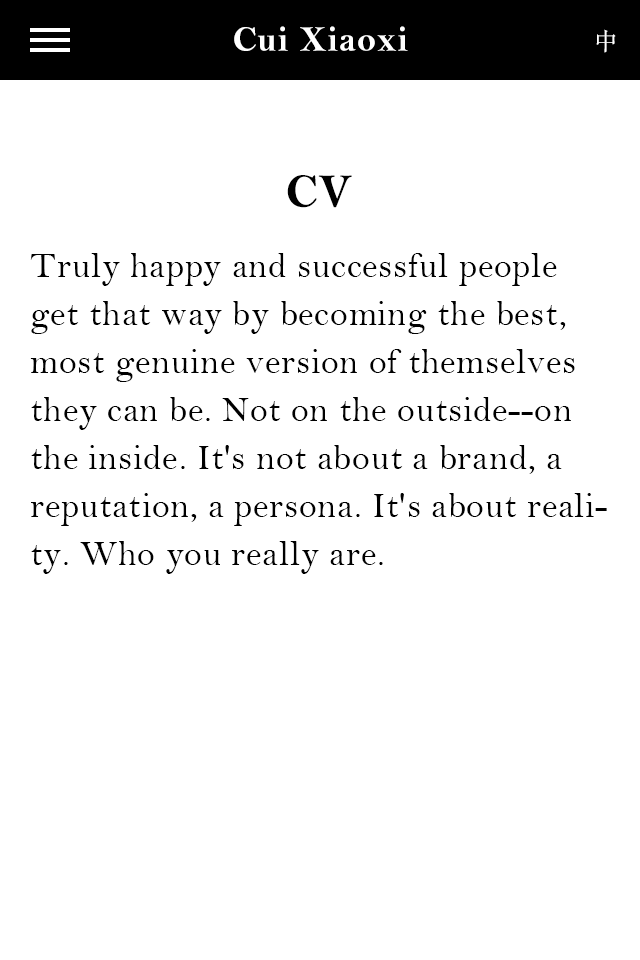
<style>
.page{position:relative;width:640px;height:960px;background:#ffffff}
.page>*{position:absolute;margin:0}
.t1{font:36px "BellMTBold";letter-spacing:0.02em;color:#ffffff}
.t2{font:36px "BellMTBold";letter-spacing:0.02em;color:#ffffff;text-transform:uppercase}
.t3{font:24px "STSongti-SC-Regular";letter-spacing:0.02em;color:#ffffff;text-transform:uppercase}
.t4{font:48px "BellMTBold";letter-spacing:0.02em;color:#000000;text-transform:uppercase}
.t5{font:36px/48px "BellMT";letter-spacing:0.02em;color:#000000}
.t6{font:16px/48px "BellMT";letter-spacing:0.02em;color:#000000}
</style>
<div class="page">
<p class="t1" style="left:234px;top:26px;width:174px;height:25px"><span class="t2">c</span>ui <span class="t2">x</span>iaoxi</p>
<p class="t3" style="left:596px;top:29px;width:20px;height:24px">中</p>
<p class="t4" style="left:287px;top:175px;width:65px;height:33px">cv</p>
<p class="t5" style="left:30px;top:253px;width:577px;height:321px"><span class="t6"><br></span>Truly happy and successful people get that way by becoming the best, most genuine version of themselves they can be. Not on the outside--on the inside. It's not about a brand, a reputation, a persona. It's about reality. Who you really are.</p>
</div>
